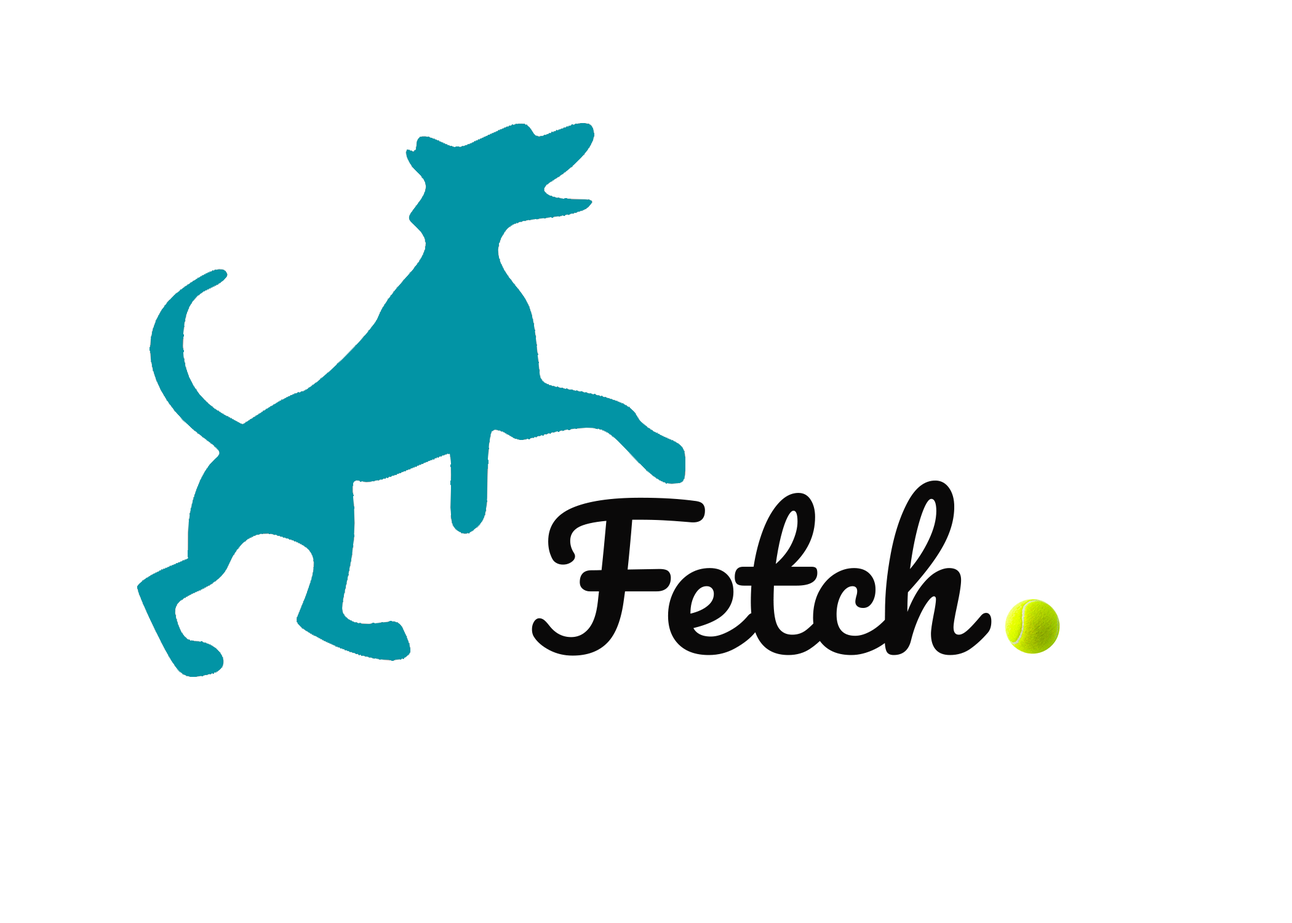
<style>
.page{position:relative;width:1292px;height:923px;background:#ffffff}
.page>*{position:absolute;margin:0}
.t1{font:184.6px "Pacifico-Regular";color:#0a0909}
</style>
<div class="page">
<p class="t1" style="left:532px;top:481px;width:460px;height:175px">Fetch</p>
</div>
